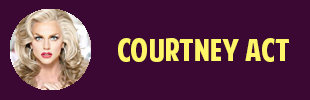
<style>
.page{position:relative;width:310px;height:100px;background:#3b0833}
.page>*{position:absolute;margin:0}
.t1{font:30px "AmericanPurpose";color:#fff568}
.t2{font:24px "Tahoma";color:#ffffff}
</style>
<div class="page">
<p class="t1" style="left:118px;top:38px;width:172px;height:24px"><span class="t2"><br></span>Courtney Act</p>
</div>
